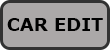
<style>
.page{position:relative;width:110px;height:50px;background:#aba8a8}
.page>*{position:absolute;margin:0}
.t1{font:18px "Verdana-Bold";color:#010101}
</style>
<div class="page">
<p class="t1" style="left:7px;top:18px;width:96px;height:13px">CAR EDIT</p>
</div>
